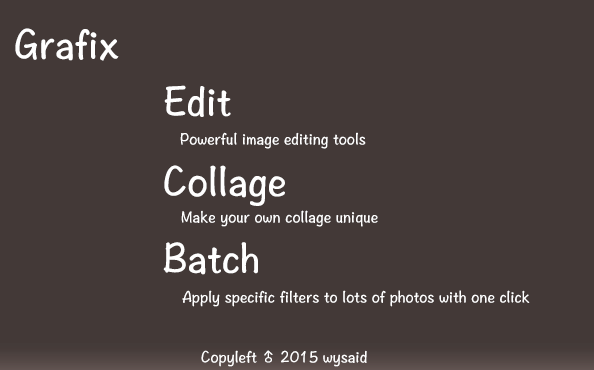
<style>
.page{position:relative;width:594px;height:370px;background:#433937}
.page>*{position:absolute;margin:0}
.t1{font:36px "HannotateSC-W7";color:#ffffff}
.t2{font:14px "HannotateSC-W7";color:#ffffff}
</style>
<div class="page">
<p class="t1" style="left:15px;top:28px;width:104px;height:33px">Grafix</p>
<p class="t1" style="left:164px;top:85px;width:67px;height:32px">Edit</p>
<p class="t2" style="left:180px;top:132px;width:186px;height:17px">Powerful image editing tools</p>
<p class="t1" style="left:164px;top:165px;width:121px;height:41px">Collage</p>
<p class="t2" style="left:181px;top:210px;width:197px;height:17px">Make your own collage unique</p>
<p class="t1" style="left:163px;top:242px;width:95px;height:33px">Batch</p>
<p class="t2" style="left:182px;top:290px;width:348px;height:17px">Apply specific filters to lots of photos with one click</p>
<p class="t2" style="left:201px;top:350px;width:166px;height:17px">Copyleft ♂ 2015 wysaid</p>
</div>
